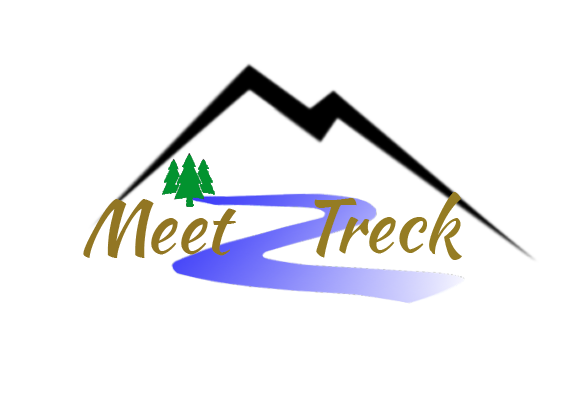
<style>
.page{position:relative;width:567px;height:394px;background:#ffffff}
.page>*{position:absolute;margin:0}
.t1{font:72px "KaushanScript-Regular";color:#957c23}
.t2{font:72px "KaushanScript-Regular";color:#927623}
</style>
<div class="page">
<p class="t1" style="left:314px;top:192px;width:148px;height:68px">Treck</p>
<p class="t2" style="left:83px;top:199px;width:154px;height:59px">Meet</p>
</div>
